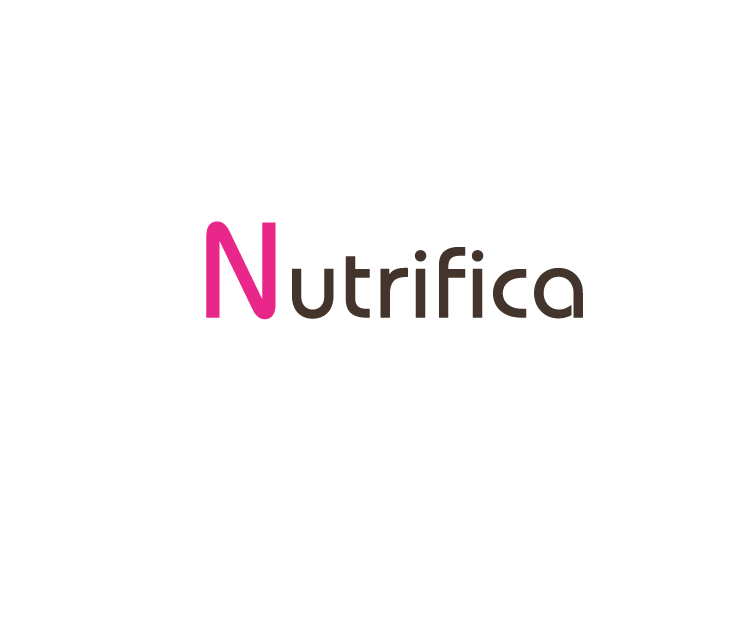
<style>
.page{position:relative;width:754px;height:640px;background:#ffffff}
.page>*{position:absolute;margin:0}
.t1{font:100px "BauhausITCbyBT-Medium";color:#43352c;font-weight:bold}
.t2{font:135px "BauhausITCbyBT-Medium";color:#e9278a;font-weight:bold}
</style>
<div class="page">
<p class="t1" style="left:206px;top:221px;width:377px;height:99px"><span class="t2">N</span>utrifica</p>
</div>
